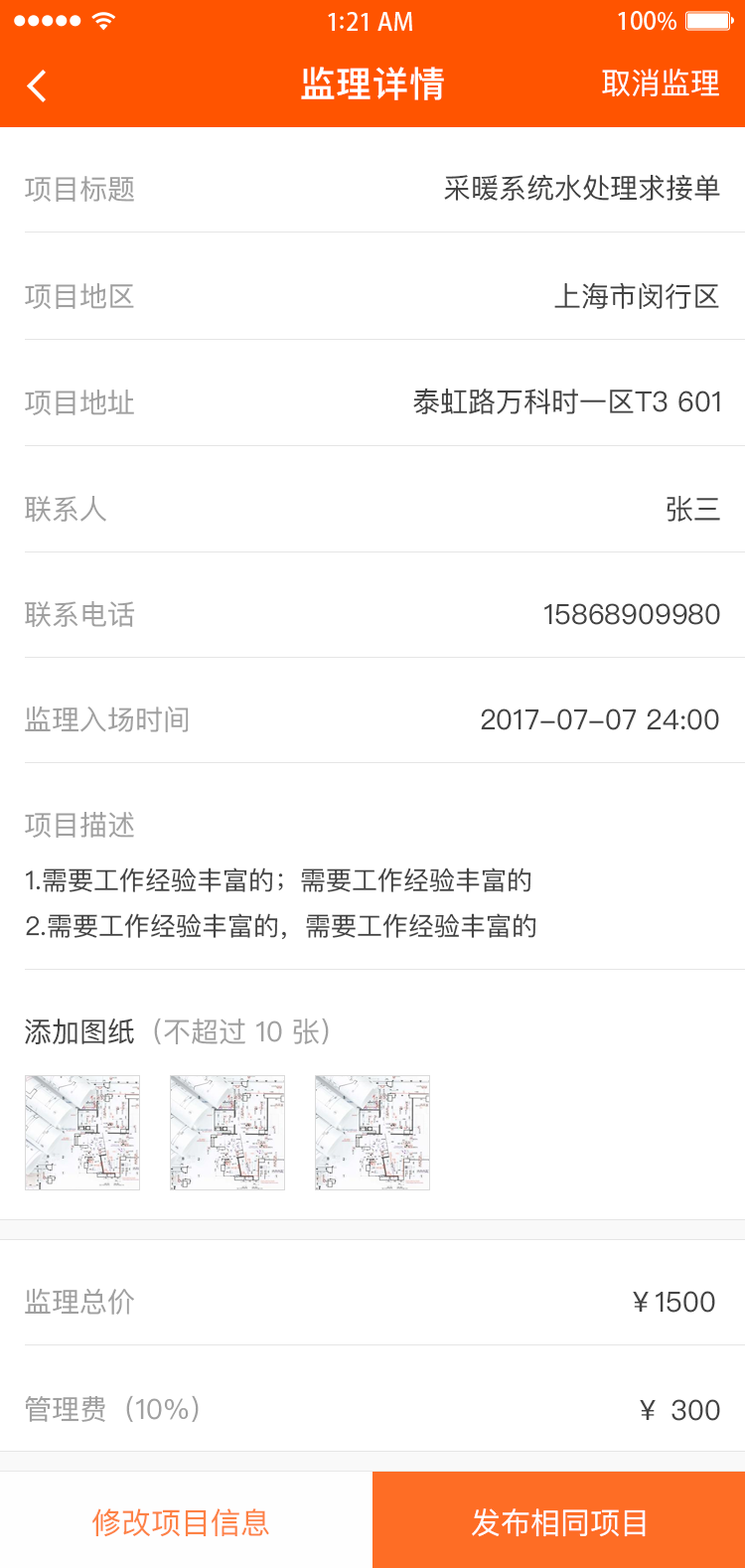
<style>
.page{position:relative;width:745px;height:1568px;background:#ffffff}
.page>*{position:absolute;margin:0}
.t1{font:35.8px "PingFangSC-Medium";letter-spacing:0.02em;color:#ffffff}
.t2{font:29.8px "PingFangSC-Regular";color:#ffffff}
.t3{font:27.8px "PingFangSC-Regular";color:#434343}
.t4{font:27.8px "PingFangSC-Regular";color:#a0a0a0}
.t5{font:25.8px/49.7px "PingFangSC-Regular";color:#434343}
.t6{font:29.8px "PingFangSC-Regular";color:#fd8245}
</style>
<div class="page">
<p class="t1" style="left:301px;top:67px;width:143px;height:33px">监理详情</p>
<p class="t2" style="left:602px;top:69px;width:117px;height:28px">取消监理</p>
<p class="t3" style="left:444px;top:174px;width:276px;height:27px">采暖系统水处理求接单</p>
<p class="t4" style="left:25px;top:176px;width:109px;height:26px">项目标题</p>
<p class="t4" style="left:25px;top:283px;width:109px;height:26px">项目地区</p>
<p class="t3" style="left:554px;top:282px;width:165px;height:27px">上海市闵行区</p>
<p class="t4" style="left:25px;top:390px;width:109px;height:25px">项目地址</p>
<p class="t3" style="left:413px;top:388px;width:307px;height:26px">泰虹路万科时一区T3 601</p>
<p class="t4" style="left:25px;top:496px;width:81px;height:27px">联系人</p>
<p class="t3" style="left:667px;top:496px;width:53px;height:26px">张三</p>
<p class="t4" style="left:25px;top:601px;width:110px;height:27px">联系电话</p>
<p class="t3" style="left:545px;top:603px;width:175px;height:22px">15868909980</p>
<p class="t4" style="left:25px;top:706px;width:164px;height:26px">监理入场时间</p>
<p class="t3" style="left:481px;top:708px;width:238px;height:22px">2017-07-07 24:00</p>
<p class="t4" style="left:25px;top:812px;width:109px;height:26px">项目描述</p>
<p class="t5" style="left:26px;top:867px;width:511px;height:73px">1.需要工作经验丰富的；需要工作经验丰富的<br>2.需要工作经验丰富的，需要工作经验丰富的</p>
<p class="t4" style="left:25px;top:1018px;width:304px;height:27px"><span class="t3">添加图纸</span>（不超过 10 张）</p>
<p class="t4" style="left:25px;top:1288px;width:109px;height:27px">监理总价</p>
<p class="t3" style="left:633px;top:1291px;width:82px;height:22px">￥1500</p>
<p class="t4" style="left:25px;top:1395px;width:174px;height:28px">管理费（10%）</p>
<p class="t3" style="left:640px;top:1399px;width:80px;height:22px">￥ 300</p>
<p class="t6" style="left:92px;top:1508px;width:177px;height:29px">修改项目信息</p>
<p class="t2" style="left:472px;top:1508px;width:174px;height:29px">发布相同项目</p>
</div>
